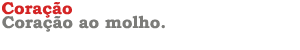
<style>
.page{position:relative;width:300px;height:50px;background:#ffffff}
.page>*{position:absolute;margin:0}
.t1{font:17px "BookmanOldStyle-Bold";color:#d42525}
.t2{font:17px "BookmanOldStyle-Bold";color:#7c7c79}
</style>
<div class="page">
<p class="t1" style="left:2px;top:2px;width:70px;height:16px">Coração</p>
<p class="t2" style="left:2px;top:15px;width:163px;height:17px">Coração ao molho.</p>
</div>
